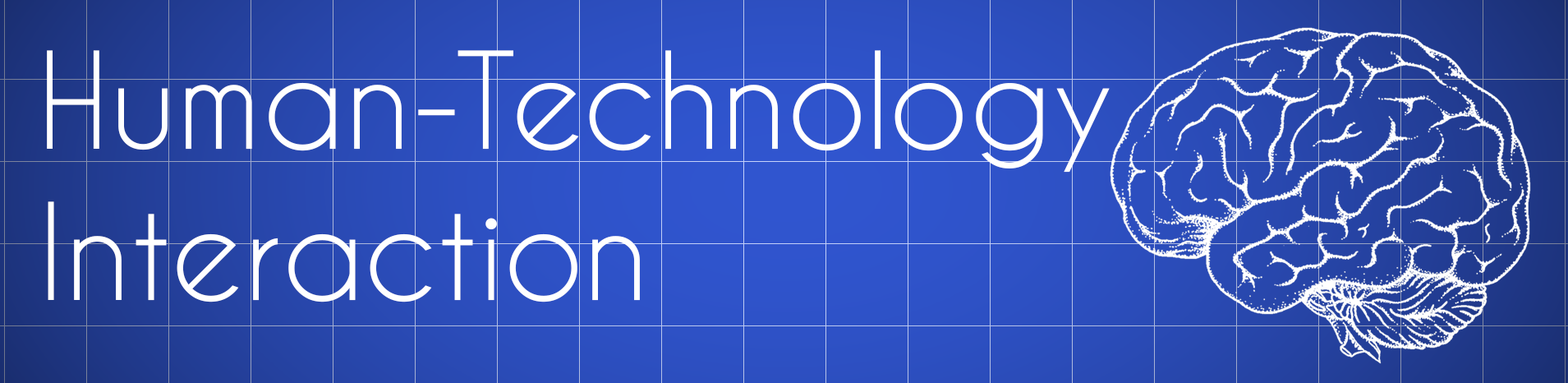
<style>
.page{position:relative;width:1568px;height:383px}
.page>*{position:absolute;margin:0}
.t1{font:125.9px "CaviarDreams";color:#ffffff}
</style>
<div class="page">
<p class="t1" style="left:47px;top:50px;width:1063px;height:252px">Human-Technology<br>Interaction</p>
</div>
